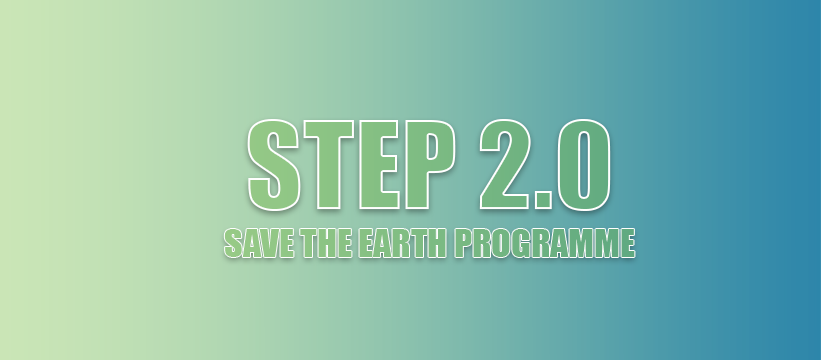
<style>
.page{position:relative;width:821px;height:360px}
.page>*{position:absolute;margin:0}
.t1{font:111.8px "Impact"}
.t2{font:36px "Impact"}
</style>
<div class="page">
<p class="t1" style="left:247px;top:119px;width:364px;height:92px">STEP 2.0</p>
<p class="t2" style="left:224px;top:229px;width:411px;height:28px">SAVE THE EARTH PROGRAMME</p>
</div>
